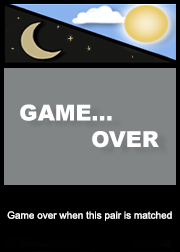
<style>
.page{position:relative;width:180px;height:252px;background:#818586}
.page>*{position:absolute;margin:0}
.t1{font:22px "Arial-Black";color:#ffffff}
.t2{font:10px "ArialMT";color:#ffffff}
</style>
<div class="page">
<p class="t1" style="left:20px;top:104px;width:139px;height:44px">GAME... <br>  OVER</p>
<p class="t2" style="left:7px;top:211px;width:165px;height:10px">Game over when this pair is matched</p>
</div>
